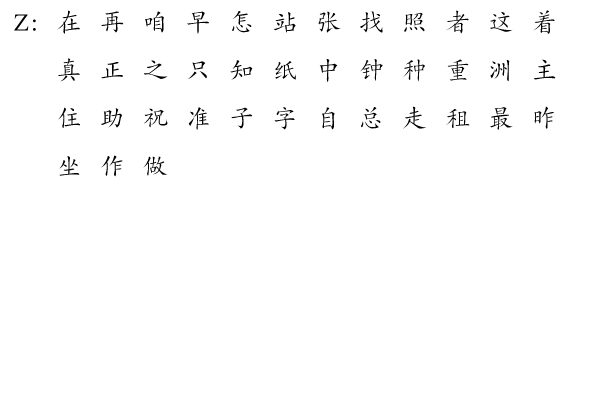
<style>
.page{position:relative;width:595px;height:417px;background:#ffffff}
.page>*{position:absolute;margin:0}
.t1{font:24px/48px "CTKaiTiSJ";letter-spacing:0.1em;color:#000000}
.t2{font:24px/48px "CTKaiTiSJ";letter-spacing:0.1em;color:#ffffff}
</style>
<div class="page">
<p class="t1" style="left:14px;top:10px;width:542px;height:167px">Z:  在  再  咱  早  怎  站  张  找  照  者  这  着  <span class="t2">Z:  </span>真  正  之  只  知  纸  中  钟  种  重  洲  主  <br><span class="t2">Z:  </span>住  助  祝  准  子  字  自  总  走  租  最  昨  <br><span class="t2">Z:  </span>坐  作  做</p>
</div>
